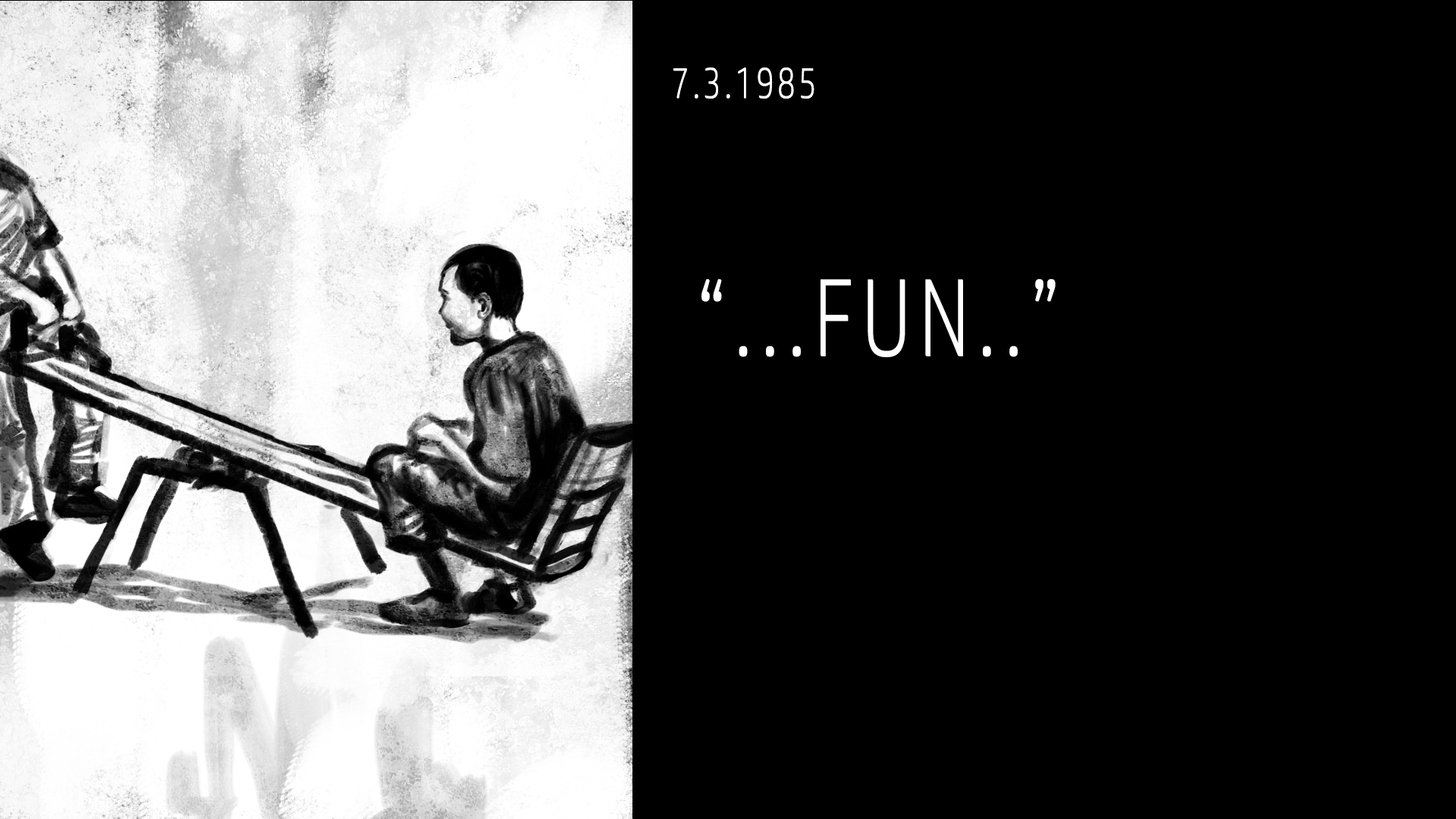
<style>
.page{position:relative;width:1456px;height:819px;background:#000000}
.page>*{position:absolute;margin:0}
.t1{font:189.6px "HPSimplified-Light";letter-spacing:0.1em;color:#ffffff;scale:0.75 1}
.t2{font:18.2px "HPSimplified-Light";letter-spacing:0.1em;color:#ffffff;scale:0.75 1}
</style>
<div class="page">
<p class="t1" style="left:673px;top:67px;width:383px;height:290px"><span class="t2">7.3.1985 <br><br><br>    <br><br></span> “...FUN..”</p>
</div>
